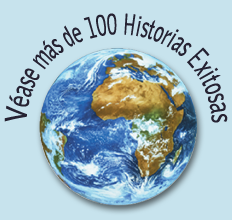
<style>
.page{position:relative;width:232px;height:220px;background:#c7e3ed}
.page>*{position:absolute;margin:0}
.t1{font:12.1px/14.3px "BellGothicStd-Bold";color:#252232}
</style>
<div class="page">
<p class="t1" style="left:4px;top:13px;width:224px;height:110px;text-align:center">Véase más de 100 Historias Exitosas</p>
</div>
